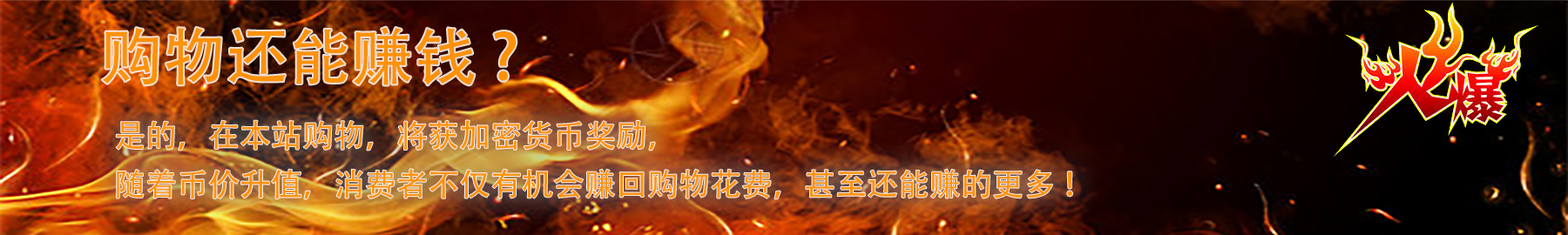
<style>
.page{position:relative;width:1568px;height:235px}
.page>*{position:absolute;margin:0}
.t1{font:62.7px "AdobeHeitiStd-Regular";color:#fc9208}
.t2{font:31.4px/12.2px "AdobeHeitiStd-Regular";color:#fc9208}
</style>
<div class="page">
<p class="t1" style="left:102px;top:27px;width:415px;height:58px">购物还能赚钱 ?</p>
<p class="t2" style="left:116px;top:120px;width:956px;height:79px">是的，在本站购物，将获加密货币奖励，<br><br><br><br>随着币价升值，消费者不仅有机会赚回购物花费，甚至还能赚的更多 ！</p>
</div>
